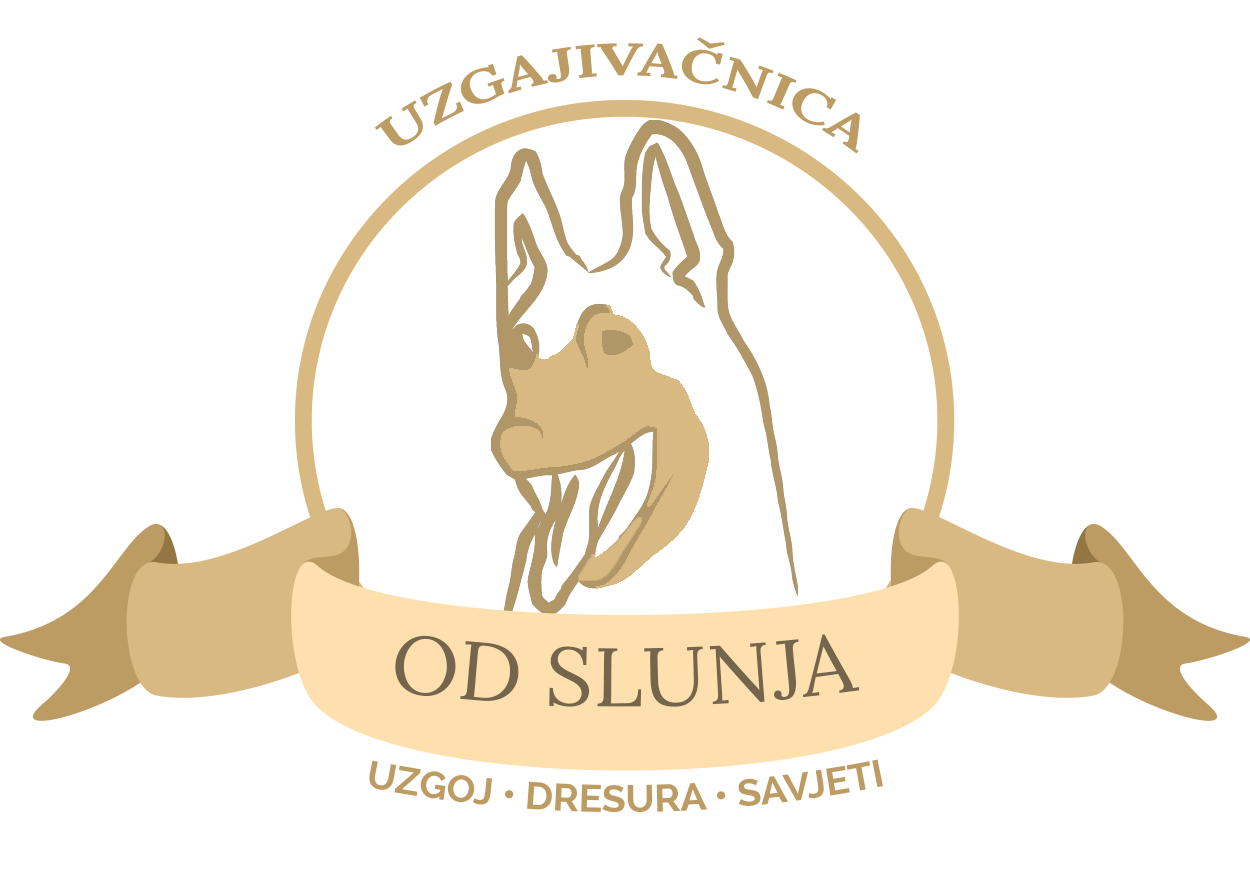
<style>
.page{position:relative;width:1250px;height:875px;background:#ffffff}
.page>*{position:absolute;margin:0}
.t1{font:45.8px "Lora-Bold";color:#bd9c63}
.t2{font:83.3px "Lora-Regular";color:#75654d}
.t3{font:37.5px "Raleway-Bold";color:#bd9c63}
</style>
<div class="page">
<p class="t1" style="left:374px;top:37px;width:486px;height:117px;text-align:center">UZGAJIVAČNICA</p>
<p class="t2" style="left:395px;top:634px;width:465px;height:73px">OD SLUNJA</p>
<p class="t3" style="left:369px;top:759px;width:514px;height:54px">UZGOJ • DRESURA • SAVJETI</p>
</div>
